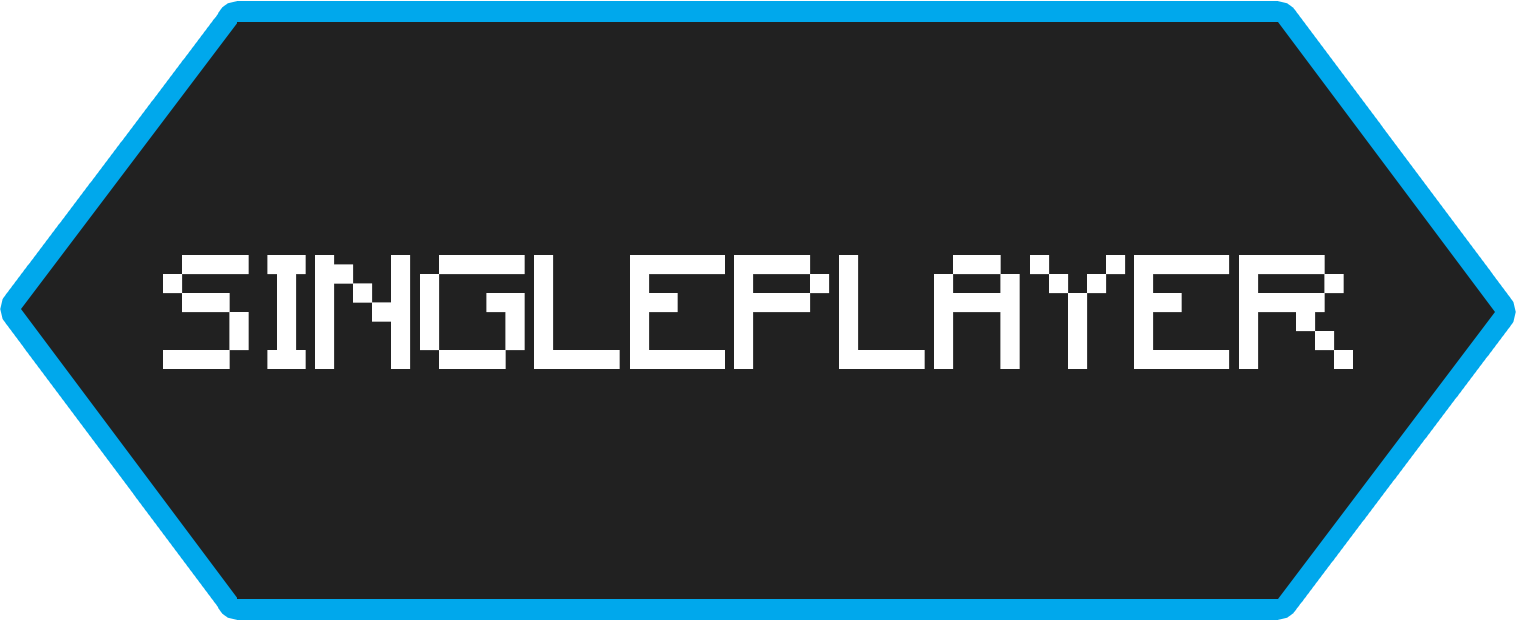
<style>
.page{position:relative;width:1516px;height:621px;background:#212121}
.page>*{position:absolute;margin:0}
.t1{font:152.3px "Minecraft";color:#ffffff}
</style>
<div class="page">
<p class="t1" style="left:163px;top:255px;width:1190px;height:114px">SINGLEPLAYER</p>
</div>
